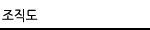
<style>
.page{position:relative;width:150px;height:30px;background:#ffffff}
.page>*{position:absolute;margin:0}
.t1{font:14px "NanumGothic";color:#000000;scale:0.9 1}
</style>
<div class="page">
<p class="t1" style="left:2px;top:9px;width:36px;height:14px">조직도</p>
</div>
